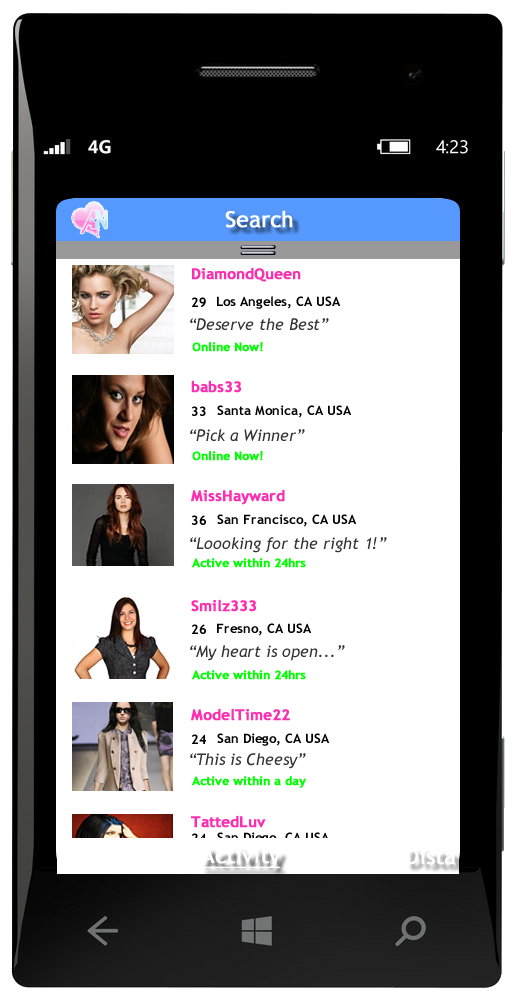
<style>
.page{position:relative;width:515px;height:1000px;background:#ffffff}
.page>*{position:absolute;margin:0}
.t1{font:22px "TrebuchetMS";color:#ffffff;font-weight:bold}
.t2{font:15px "TrebuchetMS-Bold";color:#fd2fb1;font-weight:bold}
.t3{font:13px "TrebuchetMS-Bold";color:#000000}
.t4{font:16px "TrebuchetMS-Italic";color:#333333}
.t5{font:12px "TrebuchetMS-Bold";color:#00ff00;font-weight:bold}
.t6{font:15px "TrebuchetMS-Bold";color:#fd2eb1;font-weight:bold}
.t7{font:15px "TrebuchetMS-Bold";color:#fd2db1;font-weight:bold}
.t8{font:13px "TrebuchetMS-Bold"}
.t9{font:22px "TrebuchetMS";color:#ffffff;font-weight:bold;text-decoration:underline}
</style>
<div class="page">
<p class="t1" style="left:225px;top:210px;width:68px;height:18px">Search</p>
<p class="t2" style="left:192px;top:267px;width:109px;height:15px">DiamondQueen</p>
<p class="t3" style="left:192px;top:297px;width:14px;height:10px">29</p>
<p class="t3" style="left:217px;top:296px;width:124px;height:13px">Los Angeles, CA USA</p>
<p class="t4" style="left:190px;top:318px;width:139px;height:12px">“Deserve the Best”</p>
<p class="t5" style="left:192px;top:342px;width:71px;height:10px">Online Now!</p>
<p class="t6" style="left:191px;top:380px;width:50px;height:13px">babs33</p>
<p class="t3" style="left:191px;top:406px;width:15px;height:10px">33</p>
<p class="t3" style="left:217px;top:405px;width:135px;height:13px">Santa Monica, CA USA</p>
<p class="t4" style="left:190px;top:429px;width:115px;height:12px">“Pick a Winner”</p>
<p class="t5" style="left:192px;top:451px;width:71px;height:10px">Online Now!</p>
<p class="t6" style="left:191px;top:489px;width:94px;height:16px">MissHayward</p>
<p class="t3" style="left:191px;top:515px;width:15px;height:10px">36</p>
<p class="t3" style="left:217px;top:514px;width:140px;height:13px">San Francisco, CA USA</p>
<p class="t4" style="left:190px;top:537px;width:197px;height:16px">“Loooking for the right 1!”</p>
<p class="t5" style="left:192px;top:558px;width:114px;height:10px">Active within 24hrs</p>
<p class="t6" style="left:191px;top:599px;width:65px;height:13px">Smilz333</p>
<p class="t3" style="left:192px;top:624px;width:14px;height:10px">26</p>
<p class="t3" style="left:217px;top:623px;width:95px;height:13px">Fresno, CA USA</p>
<p class="t4" style="left:190px;top:645px;width:155px;height:16px">“My heart is open...”</p>
<p class="t5" style="left:192px;top:670px;width:114px;height:10px">Active within 24hrs</p>
<p class="t6" style="left:191px;top:708px;width:99px;height:13px">ModelTime22</p>
<p class="t3" style="left:192px;top:734px;width:14px;height:10px">24</p>
<p class="t3" style="left:217px;top:733px;width:113px;height:13px">San Diego, CA USA</p>
<p class="t4" style="left:190px;top:753px;width:116px;height:16px">“This is Cheesy”</p>
<p class="t5" style="left:192px;top:776px;width:114px;height:12px">Active within a day</p>
<p class="t7" style="left:191px;top:815px;width:75px;height:13px">TattedLuv</p>
<p class="t8" style="left:192px;top:833px;width:14px;height:10px">24</p>
<p class="t8" style="left:217px;top:832px;width:113px;height:13px">San Diego, CA USA</p>
<p class="t9" style="left:201px;top:847px;width:80px;height:21px">Activity</p>
<p class="t1" style="left:406px;top:848px;width:50px;height:17px;opacity:0.7">Dista</p>
</div>
